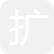
<style>
.page{position:relative;width:54px;height:54px;background:#f1f1f1}
.page>*{position:absolute;margin:0}
.t1{font:40px "MicrosoftYaHei";color:#ffffff;font-variant:small-caps}
</style>
<div class="page">
<p class="t1" style="left:9px;top:9px;width:40px;height:37px">扩</p>
</div>
